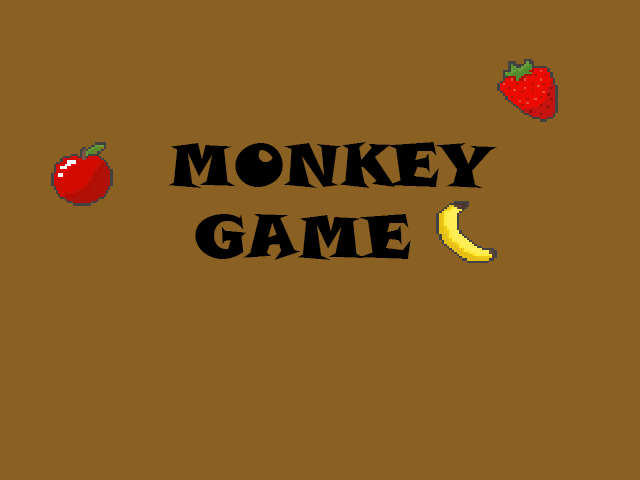
<style>
.page{position:relative;width:640px;height:480px;background:#8a6122}
.page>*{position:absolute;margin:0}
.t1{font:60px "SnapITC-Regular";color:#000000}
</style>
<div class="page">
<p class="t1" style="left:168px;top:142px;width:329px;height:118px">MONKEY<br> GAME</p>
</div>
